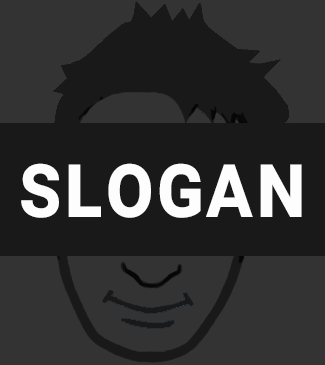
<style>
.page{position:relative;width:325px;height:365px;background:#333333}
.page>*{position:absolute;margin:0}
.t1{font:92.3px "Roboto-Bold";letter-spacing:0.045em;color:#fdfdfd;font-variant:small-caps;scale:0.87 1}
</style>
<div class="page">
<p class="t1" style="left:21px;top:163px;width:281px;height:55px">slogan</p>
</div>
